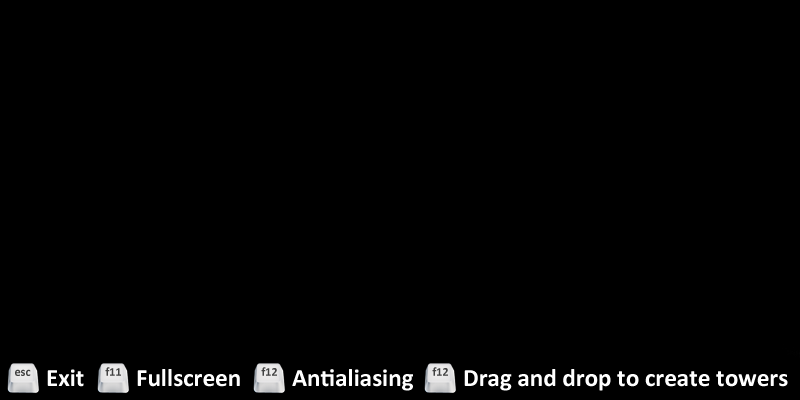
<style>
.page{position:relative;width:800px;height:400px;background:#000000}
.page>*{position:absolute;margin:0}
.t1{font:12px "Calibri-Bold";color:#424242}
.t2{font:25px "Calibri-Bold";color:#ffffff}
</style>
<div class="page">
<p class="t1" style="left:15px;top:369px;width:16px;height:7px">esc</p>
<p class="t2" style="left:47px;top:369px;width:37px;height:18px">Exit</p>
<p class="t1" style="left:105px;top:367px;width:16px;height:9px">f11</p>
<p class="t2" style="left:137px;top:369px;width:103px;height:18px">Fullscreen</p>
<p class="t1" style="left:261px;top:367px;width:16px;height:9px">f12</p>
<p class="t2" style="left:292px;top:369px;width:121px;height:22px">Antialiasing</p>
<p class="t1" style="left:432px;top:367px;width:16px;height:9px">f12</p>
<p class="t2" style="left:464px;top:369px;width:324px;height:22px">Drag and drop to create towers</p>
</div>
